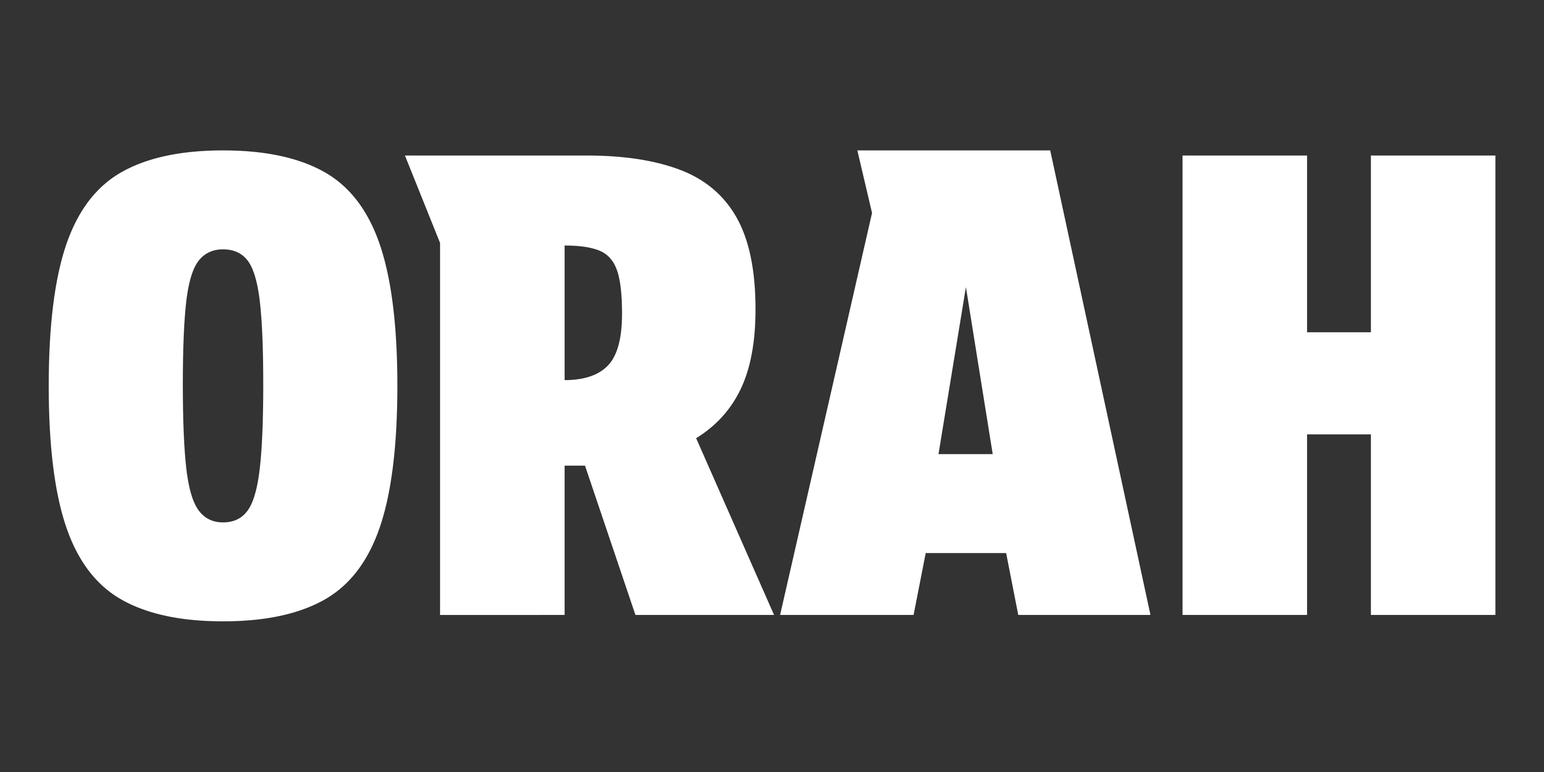
<style>
.page{position:relative;width:1544px;height:772px;background:#333333}
.page>*{position:absolute;margin:0}
.t1{font:638.4px "ProtestStrike-Regular";color:#ffffff}
</style>
<div class="page">
<p class="t1" style="left:48px;top:150px;width:1448px;height:472px">ORAH</p>
</div>
